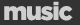
<style>
.page{position:relative;width:80px;height:25px;background:#333333}
.page>*{position:absolute;margin:0}
.t1{font:25px "GothamBlack";letter-spacing:-0.05em;color:#cfcfcf}
</style>
<div class="page">
<p class="t1" style="left:4px;top:1px;width:69px;height:20px">music</p>
</div>
